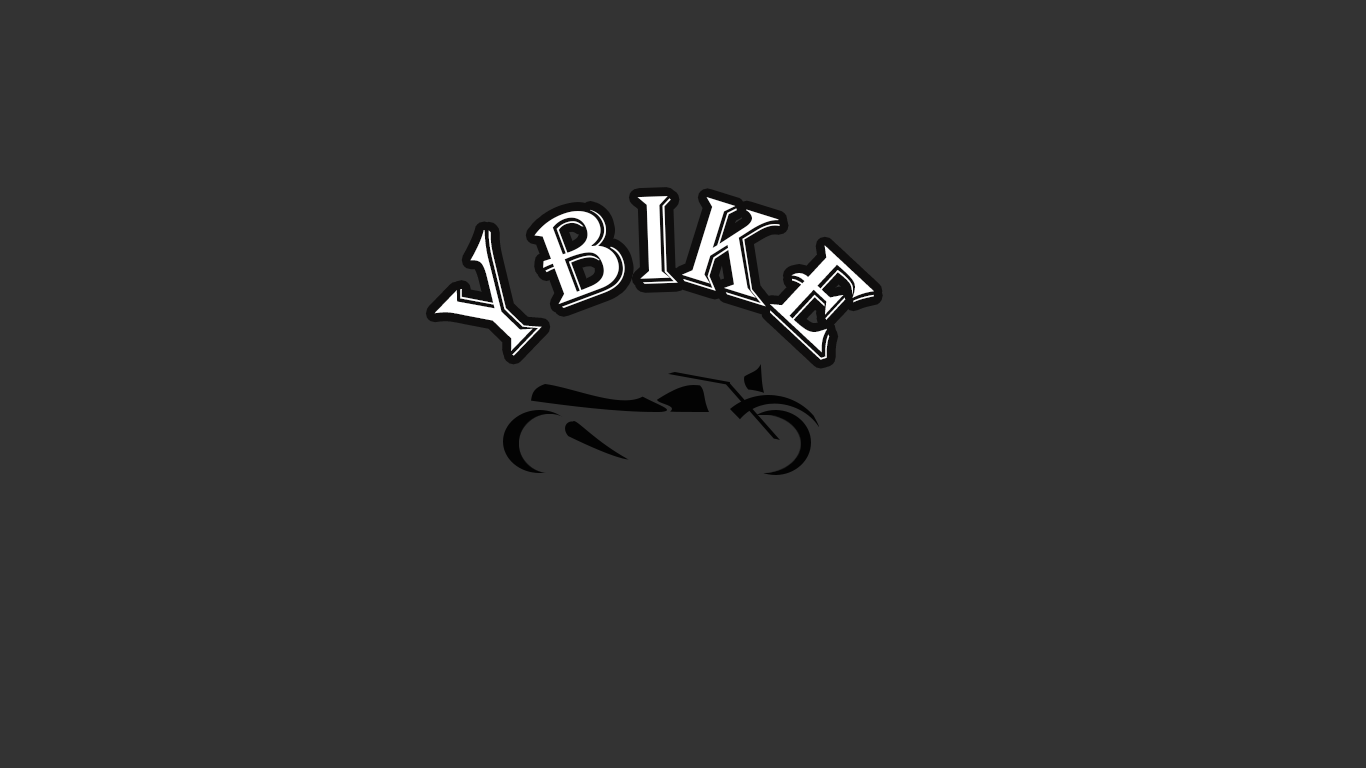
<style>
.page{position:relative;width:1366px;height:768px;background:#333333}
.page>*{position:absolute;margin:0}
.t1{font:130px "Algerian";color:#ffffff}
</style>
<div class="page">
<p class="t1" style="left:434px;top:196px;width:440px;height:164px">YBike</p>
</div>
